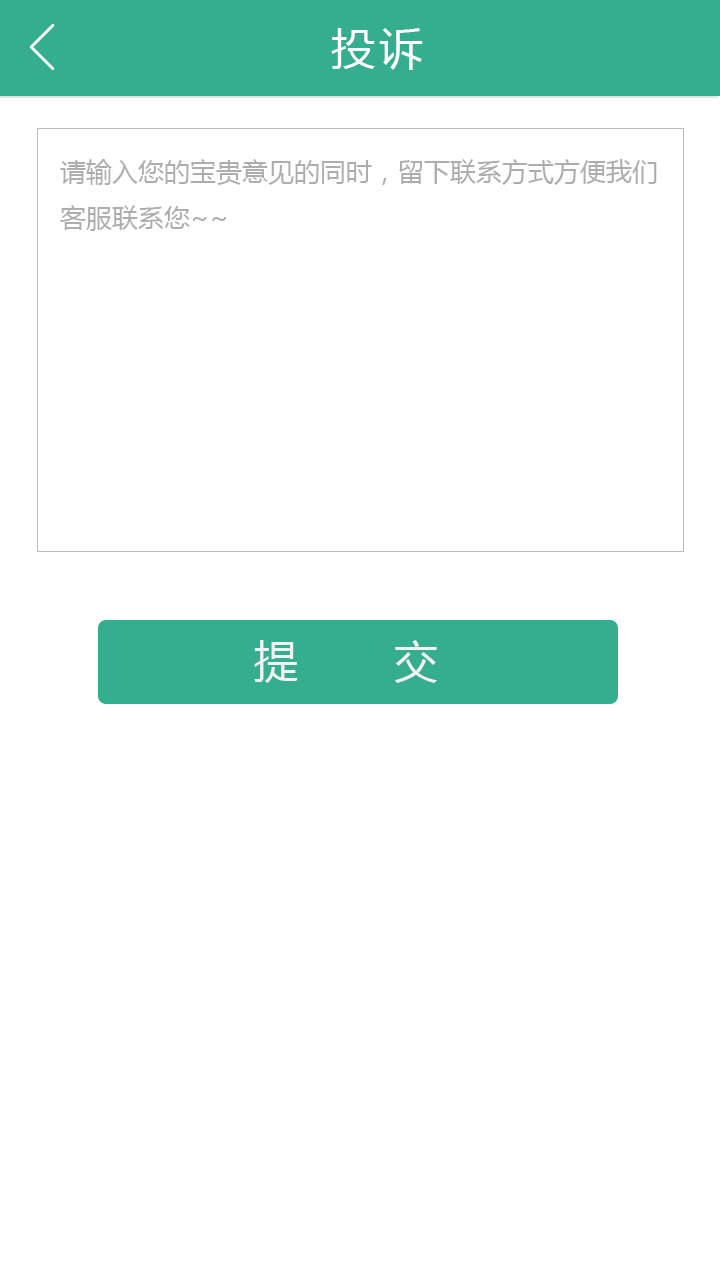
<style>
.page{position:relative;width:720px;height:1280px;background:#ffffff}
.page>*{position:absolute;margin:0}
.t1{font:44px "MicrosoftYaHei";letter-spacing:0.1em;color:#ffffff}
.t2{font:26px "MicrosoftYaHei";color:#acacac}
.t3{font:44px "MicrosoftYaHei";letter-spacing:0.2em;color:#f1f1f1}
</style>
<div class="page">
<p class="t1" style="left:331px;top:28px;width:92px;height:42px">投诉</p>
<p class="t2" style="left:60px;top:159px;width:597px;height:72px">请输入您的宝贵意见的同时，留下联系方式方便我们<br>客服联系您~~</p>
<p class="t3" style="left:254px;top:640px;width:183px;height:43px">提    交</p>
</div>
